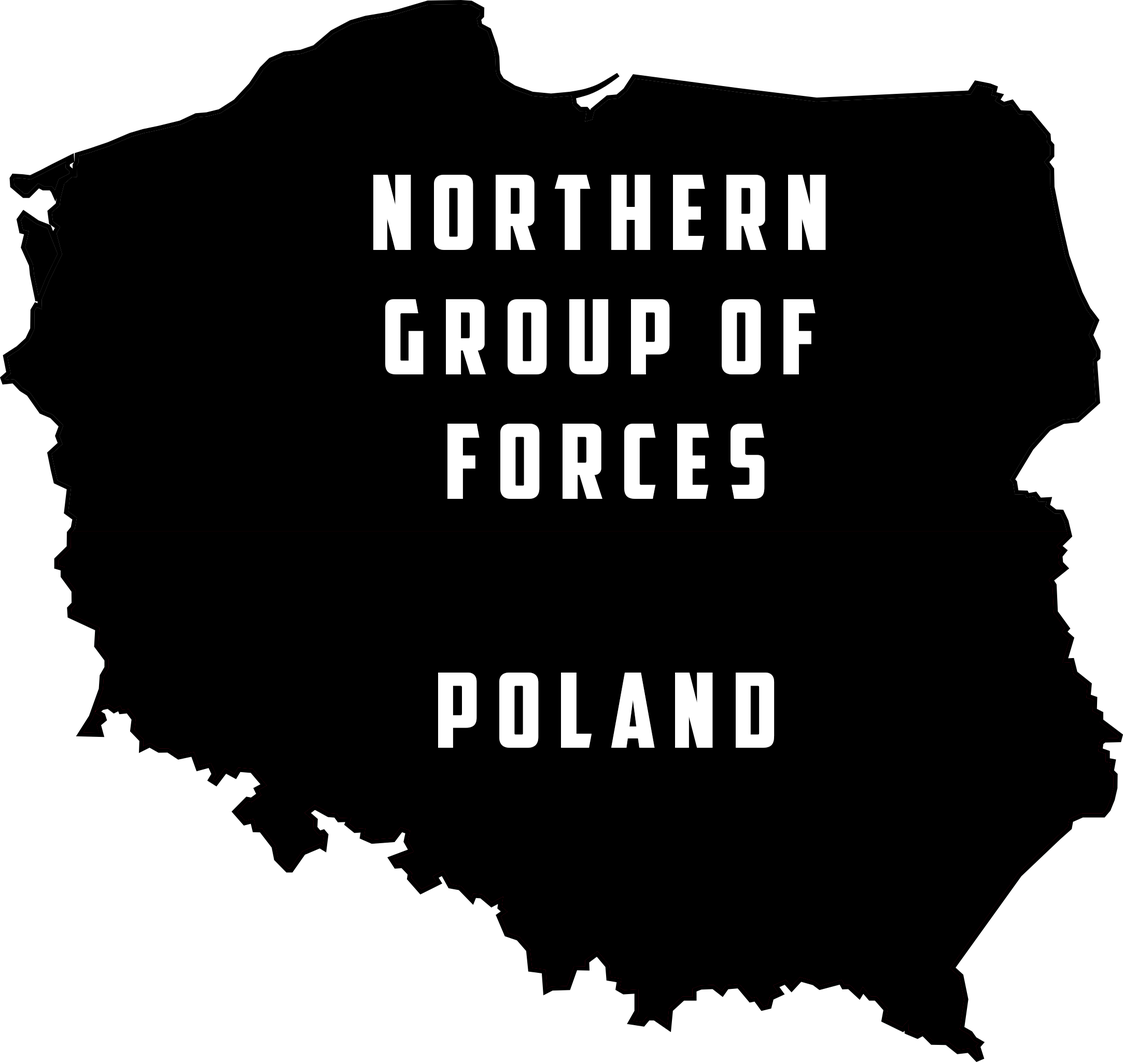
<style>
.page{position:relative;width:1123px;height:1062px;background:#000000}
.page>*{position:absolute;margin:0}
.t1{font:103.7px "AmericanCaptain";letter-spacing:0.16em;color:#ffffff}
</style>
<div class="page">
<p class="t1" style="left:373px;top:175px;width:453px;height:573px;text-align:center">NOrthern <br>Group of <br>Forces<br><br>poland</p>
</div>
